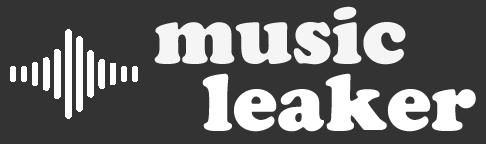
<style>
.page{position:relative;width:486px;height:144px;background:#333333}
.page>*{position:absolute;margin:0}
.t1{font:80px "CooperBlackStd";color:#f5f5f5}
.t2{font:80px "CooperBlackStd";color:#ffffff}
</style>
<div class="page">
<p class="t1" style="left:154px;top:6px;width:252px;height:59px">music</p>
<p class="t2" style="left:202px;top:73px;width:274px;height:59px">leaker</p>
</div>
